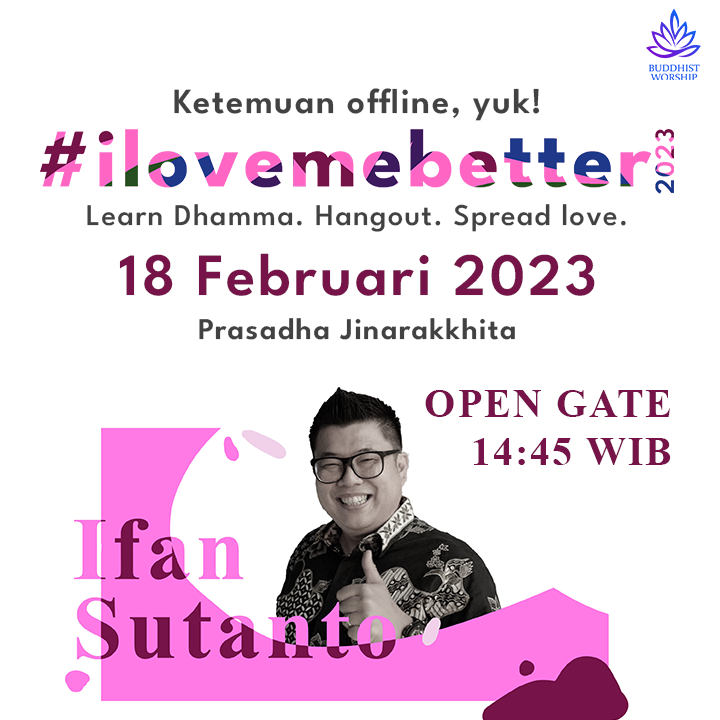
<style>
.page{position:relative;width:720px;height:720px;background:#ffffff}
.page>*{position:absolute;margin:0}
.t1{font:35.1px "LeagueSpartan-SemiBold";letter-spacing:0.05em;color:#424242}
.t2{font:30px "LeagueSpartan-Medium";letter-spacing:0.05em;color:#424242}
.t3{font:60px "LeagueSpartan-SemiBold";letter-spacing:0.05em;color:#761449}
.t4{font:30px "LeagueSpartan-SemiBold";letter-spacing:0.05em;color:#424242}
.t5{font:40px/220px "TimesNewRomanPS-BoldMT";letter-spacing:0.05em;color:#761449}
.t6{font:40px "TimesNewRomanPS-BoldMT";letter-spacing:0.05em;color:#761449}
</style>
<div class="page">
<p class="t1" style="left:174px;top:88px;width:366px;height:33px">Ketemuan offline, yuk!</p>
<p class="t2" style="left:87px;top:204px;width:539px;height:28px">Learn Dhamma. Hangout. Spread love.</p>
<p class="t3" style="left:119px;top:253px;width:476px;height:43px">18 Februari 2023</p>
<p class="t4" style="left:199px;top:318px;width:316px;height:22px">Prasadha Jinarakkhita</p>
<p class="t5" style="left:425px;top:390px;width:246px;height:75px;text-align:right">OPEN GATE<span class="t6"><br>14:45 WIB</span></p>
</div>
